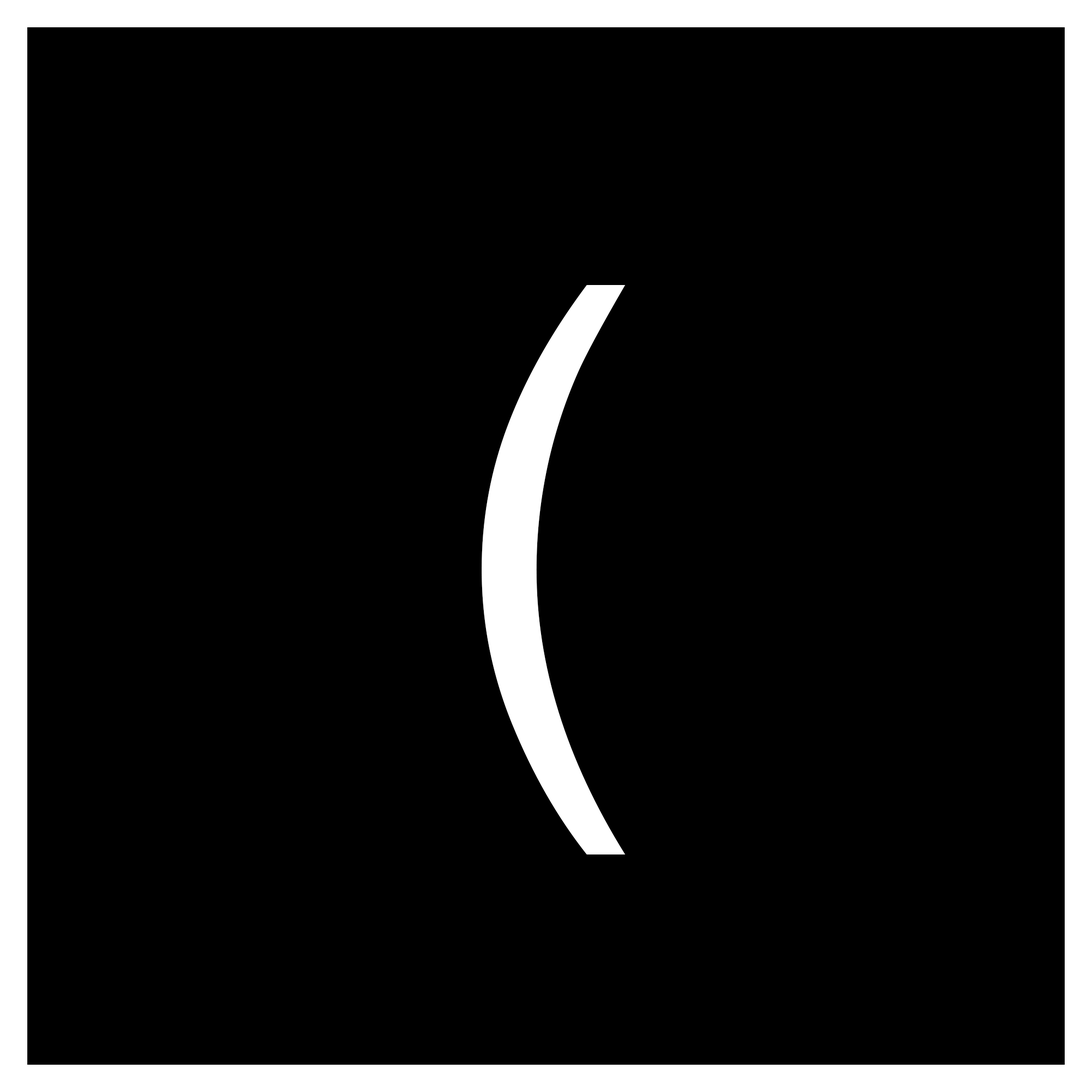
<style>
.page{position:relative;width:1092px;height:1092px;background:#000000}
.page>*{position:absolute;margin:0}
.t1{font:606.7px "ArialMT";color:#ffffff}
</style>
<div class="page">
<p class="t1" style="left:482px;top:285px;width:143px;height:569px">(</p>
</div>
